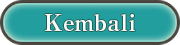
<style>
.page{position:relative;width:180px;height:45px}
.page>*{position:absolute;margin:0}
.t1{font:23px "RyuminPro-ExBold";color:#ffffff}
</style>
<div class="page">
<p class="t1" style="left:44px;top:14px;width:91px;height:17px">Kembali</p>
</div>
